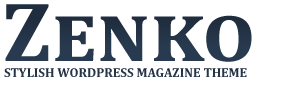
<style>
.page{position:relative;width:300px;height:85px;background:#ffffff}
.page>*{position:absolute;margin:0}
.t1{font:85px "Cambria-Bold";color:#283a4f;font-variant:small-caps;scale:1.03 1}
.t2{font:13px "Cambria-Bold";color:#283a4f;text-transform:uppercase}
</style>
<div class="page">
<p class="t1" style="left:5px;top:4px;width:247px;height:58px">Zenko</p>
<p class="t2" style="left:4px;top:68px;width:243px;height:9px">Stylish wordpress Magazine Theme</p>
</div>
